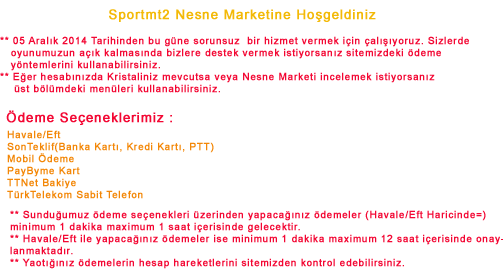
<style>
.page{position:relative;width:503px;height:277px;background:#ffffff}
.page>*{position:absolute;margin:0}
.t1{font:13.3px "ArialMT";letter-spacing:0.05em;color:#f3b907;font-weight:bold}
.t2{font:10px "ArialMT";letter-spacing:0.05em;color:#f30733;font-weight:bold}
.t3{font:13.3px "ArialMT";letter-spacing:0.05em;color:#f30733;font-weight:bold}
.t4{font:10px "ArialMT";letter-spacing:0.05em;color:#f38707;font-weight:bold}
</style>
<div class="page">
<p class="t1" style="left:109px;top:9px;width:267px;height:13px">Sportmt2 Nesne Marketine Hoşgeldiniz</p>
<p class="t2" style="left:0px;top:36px;width:469px;height:57px">** 05 Aralık 2014 Tarihinden bu güne sorunsuz  bir hizmet vermek için çalışıyoruz. Sizlerde <br>   oyunumuzun açık kalmasında bizlere destek vermek istiyorsanız sitemizdeki ödeme <br>   yöntemlerini kullanabilirsiniz.<br>** Eğer hesabınızda Kristaliniz mevcutsa veya Nesne Marketi incelemek istiyorsanız<br>    üst bölümdeki menüleri kullanabilirsiniz.</p>
<p class="t3" style="left:6px;top:110px;width:166px;height:15px">Ödeme Seçeneklerimiz :</p>
<p class="t4" style="left:7px;top:130px;width:207px;height:69px">Havale/Eft<br>SonTeklif(Banka Kartı, Kredi Kartı, PTT)<br>Mobil Ödeme<br>PayByme Kart<br>TTNet Bakiye<br>TürkTelekom Sabit Telefon</p>
<p class="t2" style="left:10px;top:210px;width:494px;height:59px">** Sunduğumuz ödeme seçenekleri üzerinden yapacağınız ödemeler (Havale/Eft Haricinde=)<br>minimum 1 dakika maximum 1 saat içerisinde gelecektir.<br>** Havale/Eft ile yapacağınız ödemeler ise minimum 1 dakika maximum 12 saat içerisinde onay-<br>lanmaktadır.<br>** Yaotığınız ödemelerin hesap hareketlerini sitemizden kontrol edebilirsiniz.</p>
</div>
